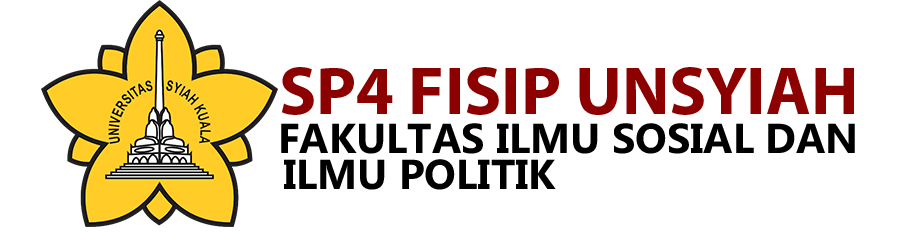
<style>
.page{position:relative;width:904px;height:244px;background:#ffffff}
.page>*{position:absolute;margin:0}
.t1{font:68.7px "MyriadPro-Bold";color:#8d0000}
.t2{font:41.7px "MicrosoftPhagsPa-Bold";color:#000000}
</style>
<div class="page">
<p class="t1" style="left:282px;top:67px;width:572px;height:48px">SP4 FISIP UNSYIAH</p>
<p class="t2" style="left:281px;top:123px;width:574px;height:31px">FAKULTAS ILMU SOSIAL DAN</p>
<p class="t2" style="left:284px;top:159px;width:272px;height:31px">ILMU POLITIK</p>
</div>
